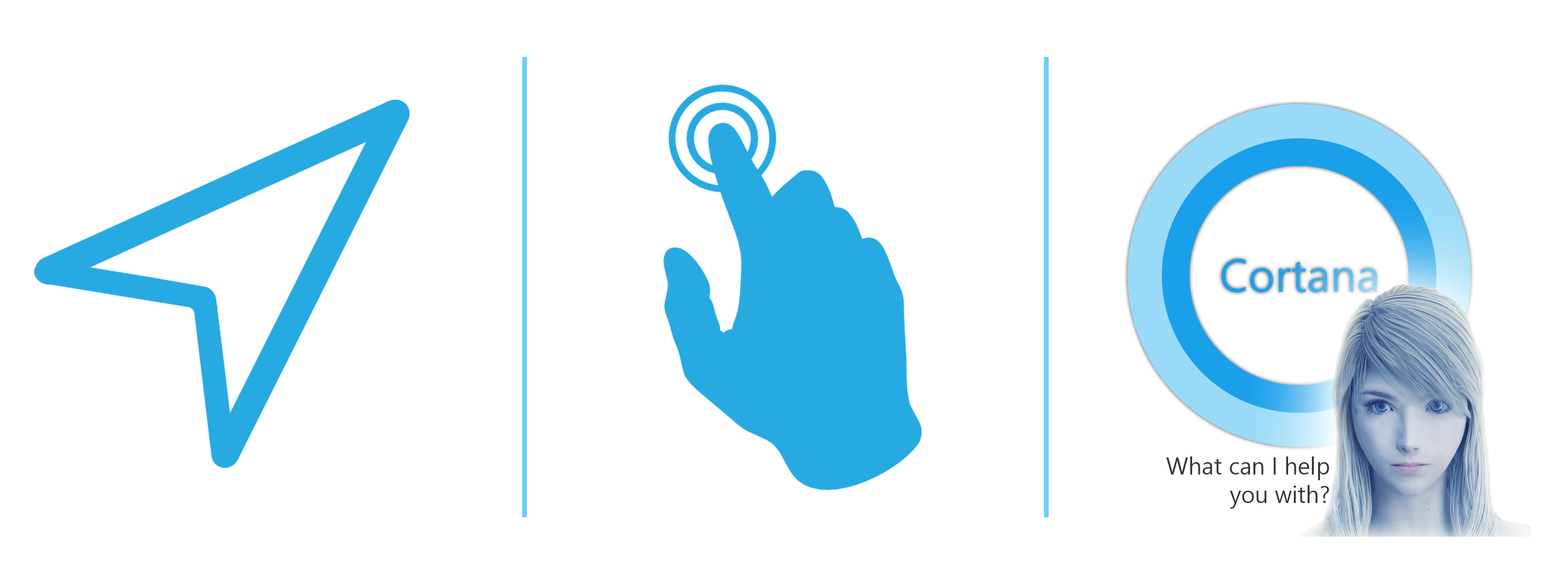
<style>
.page{position:relative;width:1568px;height:570px;background:#ffffff}
.page>*{position:absolute;margin:0}
.t1{font:23.8px "SegoeUI";color:#363636}
</style>
<div class="page">
<p class="t1" style="left:1166px;top:457px;width:163px;height:52px;text-align:right">What can I help <br>you with?</p>
</div>
